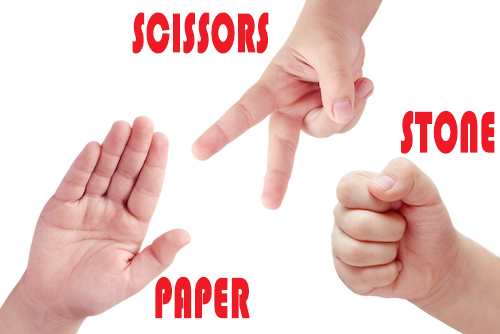
<style>
.page{position:relative;width:500px;height:334px;background:#ffffff}
.page>*{position:absolute;margin:0}
.t1{font:57.8px "Bauhaus93";color:#ee1a26;font-weight:bold;scale:0.56 1}
.t2{font:60.5px "Bauhaus93";color:#ee1a26;font-weight:bold;scale:0.55 1}
.t3{font:59.8px "Bauhaus93";color:#ee1a26;font-weight:bold;scale:0.55 1}
</style>
<div class="page">
<p class="t1" style="left:132px;top:12px;width:137px;height:42px">SCISSORS</p>
<p class="t2" style="left:401px;top:110px;width:94px;height:44px">STONE</p>
<p class="t3" style="left:155px;top:276px;width:95px;height:43px">PAPER</p>
</div>
